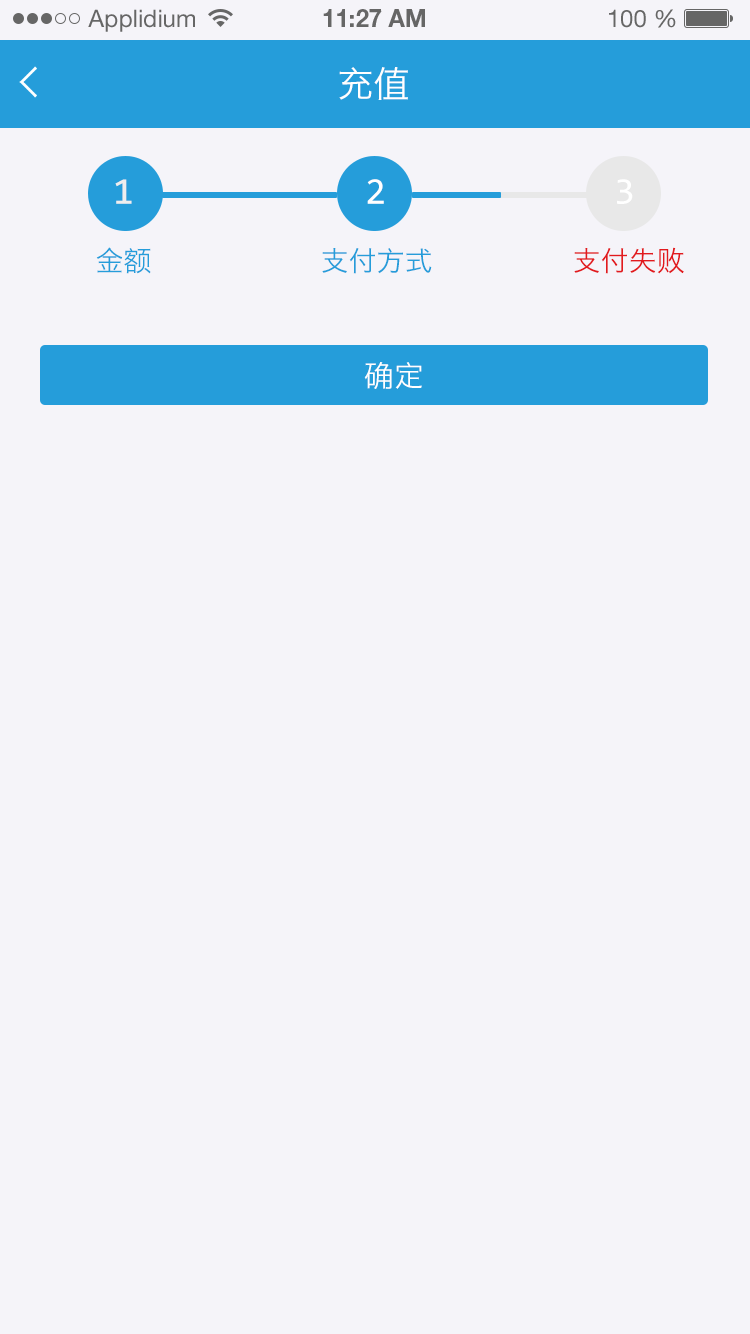
<style>
.page{position:relative;width:750px;height:1334px;background:#f5f4f9}
.page>*{position:absolute;margin:0}
.t1{font:24px "HelveticaNeueLTStd-Roman";color:#666666}
.t2{font:24px "HelveticaNeueLTStd-Bd";color:#666666}
.t3{font:36px "HiraginoSansGB-W3";color:#ffffff;text-transform:uppercase}
.t4{font:38px "Consolas";color:#eeeeee;text-transform:uppercase}
.t5{font:38px "Consolas";color:#ffffff;text-transform:uppercase}
.t6{font:28px "HiraginoSansGB-W3";color:#259dda;text-transform:uppercase}
.t7{font:28px "HiraginoSansGB-W3";color:#e21a1e;text-transform:uppercase}
.t8{font:30px "HiraginoSansGB-W3";color:#ffffff;text-transform:uppercase}
</style>
<div class="page">
<p class="t1" style="left:88px;top:9px;width:107px;height:23px">Applidium</p>
<p class="t2" style="left:323px;top:9px;width:102px;height:18px">11:27 AM</p>
<p class="t1" style="left:609px;top:9px;width:67px;height:19px">100 %</p>
<p class="t3" style="left:339px;top:67px;width:69px;height:33px">充值</p>
<p class="t4" style="left:115px;top:179px;width:17px;height:25px">1</p>
<p class="t5" style="left:367px;top:179px;width:17px;height:25px">2</p>
<p class="t5" style="left:617px;top:179px;width:16px;height:25px">3</p>
<p class="t6" style="left:96px;top:247px;width:55px;height:27px">金额</p>
<p class="t6" style="left:322px;top:248px;width:110px;height:26px">支付方式</p>
<p class="t7" style="left:574px;top:247px;width:110px;height:27px">支付失败</p>
<p class="t8" style="left:364px;top:362px;width:58px;height:27px">确定</p>
</div>
